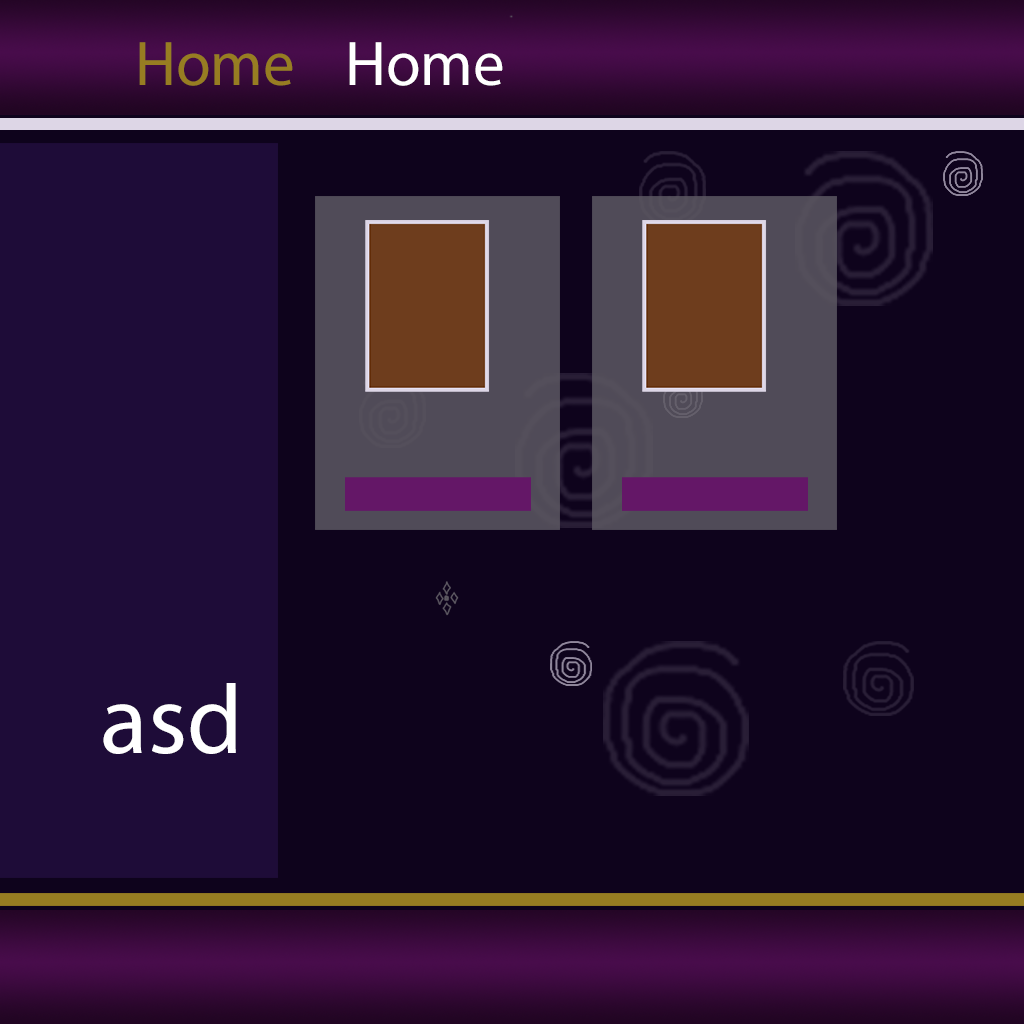
<style>
.page{position:relative;width:1024px;height:1024px;background:#0e031c}
.page>*{position:absolute;margin:0}
.t1{font:63.5px "MyriadPro-Regular";color:#977d22}
.t2{font:63.5px "MyriadPro-Regular";color:#ffffff}
.t3{font:98.8px "MyriadPro-Regular";color:#ffffff}
</style>
<div class="page">
<p class="t1" style="left:139px;top:42px;width:154px;height:44px">Home</p>
<p class="t2" style="left:349px;top:42px;width:154px;height:44px">Home</p>
<p class="t3" style="left:103px;top:683px;width:133px;height:71px">asd</p>
</div>
